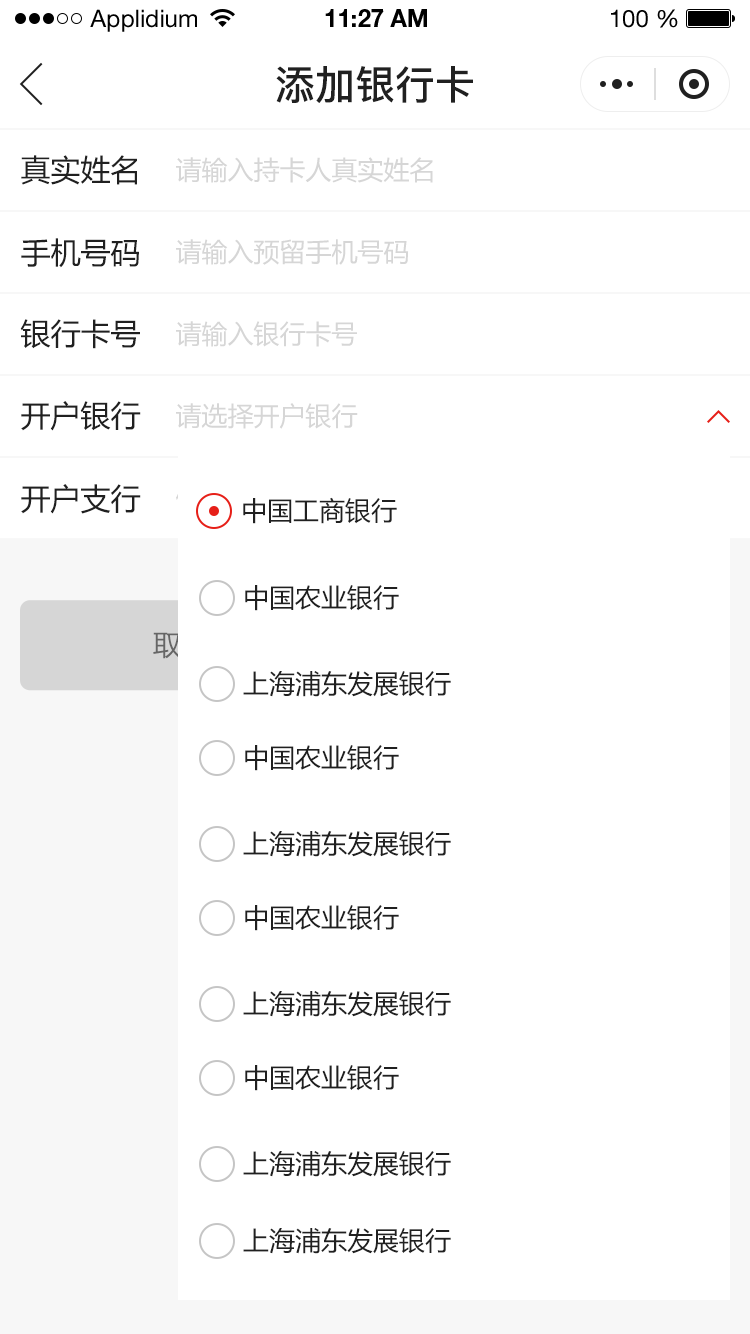
<style>
.page{position:relative;width:750px;height:1334px;background:#ffffff}
.page>*{position:absolute;margin:0}
.t1{font:24px "HelveticaNeueLTStd-Roman";color:#000000}
.t2{font:24px "HelveticaNeueLTStd-Bd";color:#000000}
.t3{font:40px "PingFang-SC-Bold";color:#202020;text-transform:uppercase}
.t4{font:30px "MicrosoftYaHei";color:#202020;text-transform:uppercase}
.t5{font:26px "MicrosoftYaHei";color:#d6d6d6;text-transform:uppercase}
.t6{font:26px "MicrosoftYaHei";color:#202020;text-transform:uppercase}
.t7{font:28px "MicrosoftYaHei";text-transform:uppercase}
</style>
<div class="page">
<p class="t1" style="left:90px;top:9px;width:107px;height:23px">Applidium</p>
<p class="t2" style="left:325px;top:9px;width:102px;height:18px">11:27 AM</p>
<p class="t1" style="left:611px;top:9px;width:67px;height:19px">100 %</p>
<p class="t3" style="left:276px;top:66px;width:197px;height:37px">添加银行卡</p>
<p class="t4" style="left:21px;top:155px;width:116px;height:30px">真实姓名</p>
<p class="t5" style="left:176px;top:157px;width:257px;height:26px">请输入持卡人真实姓名</p>
<p class="t4" style="left:21px;top:238px;width:118px;height:30px">手机号码</p>
<p class="t5" style="left:176px;top:239px;width:233px;height:26px">请输入预留手机号码</p>
<p class="t4" style="left:20px;top:319px;width:120px;height:30px">银行卡号</p>
<p class="t5" style="left:176px;top:321px;width:181px;height:26px">请输入银行卡号</p>
<p class="t4" style="left:21px;top:401px;width:120px;height:30px">开户银行</p>
<p class="t5" style="left:176px;top:403px;width:182px;height:26px">请选择开户银行</p>
<p class="t4" style="left:21px;top:484px;width:120px;height:30px">开户支行</p>
<p class="t6" style="left:243px;top:497px;width:154px;height:27px">中国工商银行</p>
<p class="t6" style="left:245px;top:585px;width:154px;height:26px">中国农业银行</p>
<p class="t7" style="left:153px;top:631px;width:55px;height:28px">取消</p>
<p class="t6" style="left:243px;top:671px;width:208px;height:26px">上海浦东发展银行</p>
<p class="t6" style="left:245px;top:745px;width:154px;height:26px">中国农业银行</p>
<p class="t6" style="left:243px;top:831px;width:208px;height:26px">上海浦东发展银行</p>
<p class="t6" style="left:245px;top:905px;width:154px;height:26px">中国农业银行</p>
<p class="t6" style="left:243px;top:991px;width:208px;height:26px">上海浦东发展银行</p>
<p class="t6" style="left:245px;top:1065px;width:154px;height:26px">中国农业银行</p>
<p class="t6" style="left:243px;top:1151px;width:208px;height:26px">上海浦东发展银行</p>
<p class="t6" style="left:243px;top:1228px;width:208px;height:26px">上海浦东发展银行</p>
</div>
